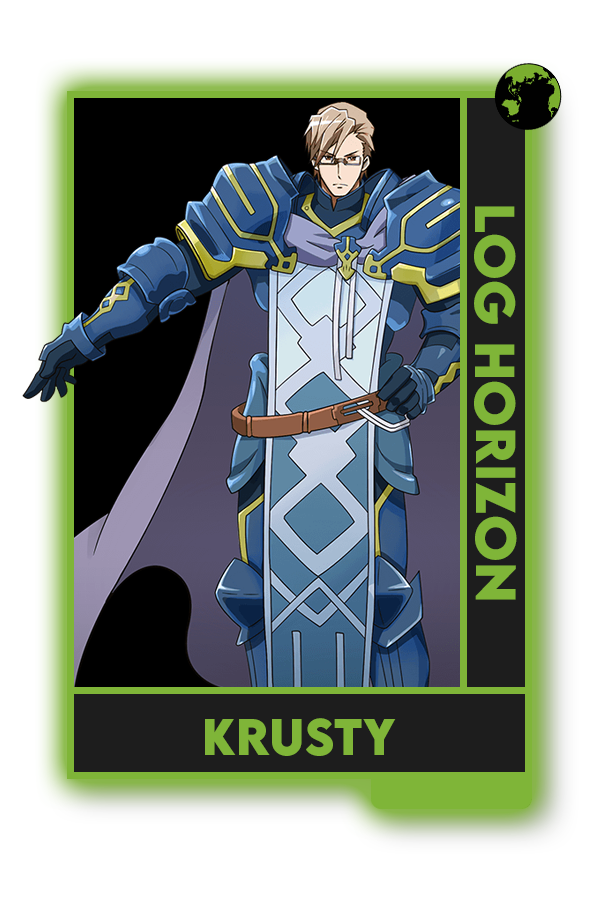
<style>
.page{position:relative;width:600px;height:900px;background:#ffffff}
.page>*{position:absolute;margin:0}
.t1{font:50px "LEMONMILK-Bold";color:#7fad41}
.t2{font:45.8px "LEMONMILK-Bold";color:#7fad41}
</style>
<div class="page">
<p class="t1" style="left:474px;top:206px;width:43px;height:394px;rotate:90deg">Log Horizon</p>
<p class="t2" style="left:205px;top:718px;width:191px;height:38px">Krusty</p>
</div>
